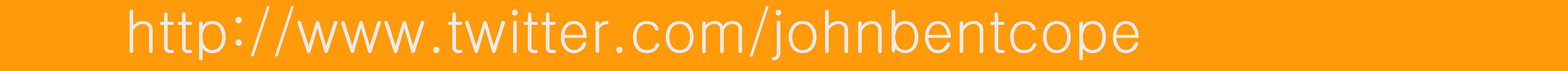
<style>
.page{position:relative;width:1568px;height:71px;background:#ff9a0a}
.page>*{position:absolute;margin:0}
.t1{font:57.8px "Gulim";color:#ebebeb}
</style>
<div class="page">
<p class="t1" style="left:130px;top:6px;width:1009px;height:54px">http://www.twitter.com/johnbentcope</p>
</div>
